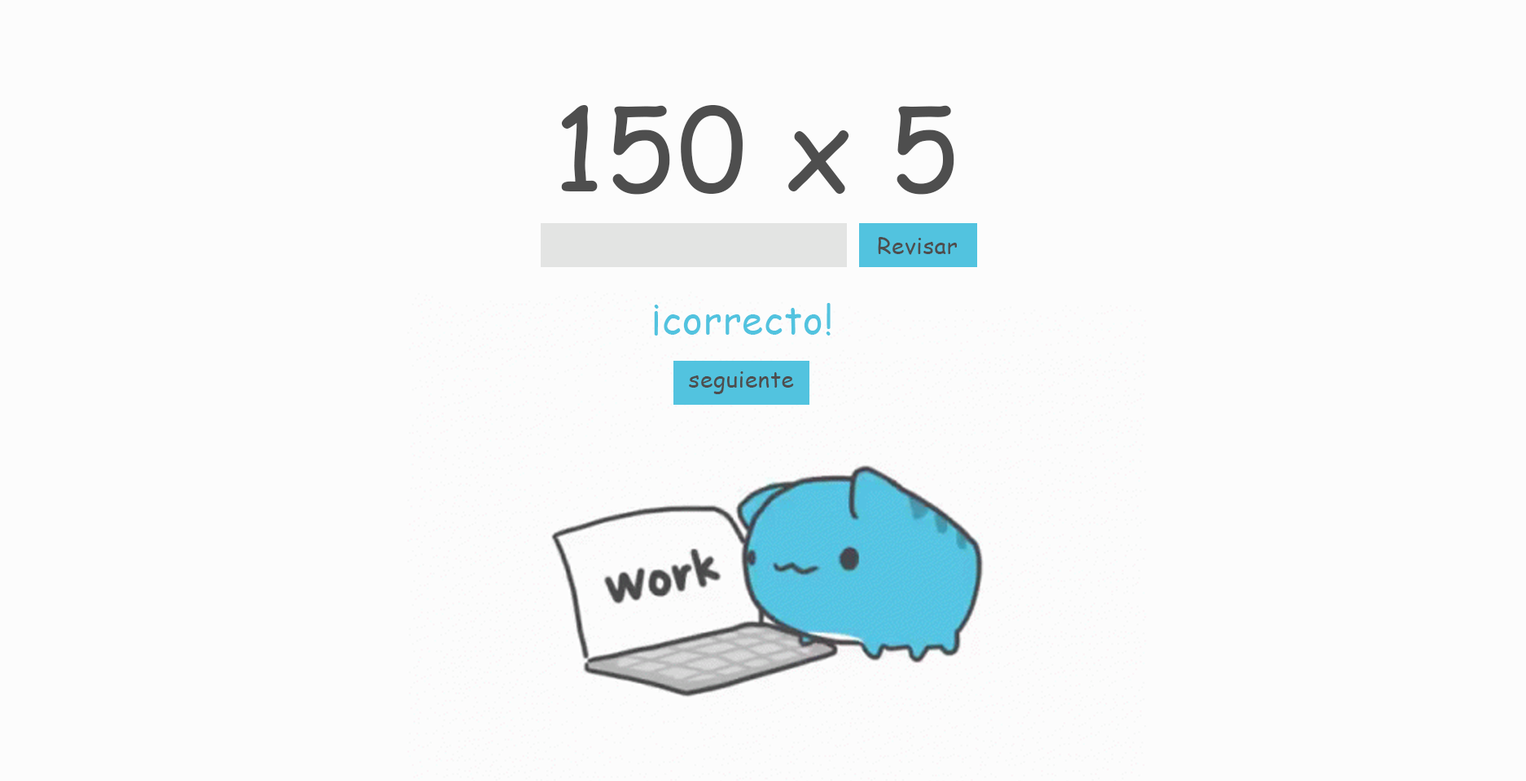
<style>
.page{position:relative;width:1526px;height:781px;background:#fcfcfc}
.page>*{position:absolute;margin:0}
.t1{font:113.2px "ComicSansMS";letter-spacing:0.02em;color:#4e4e4e}
.t2{font:22.8px "ComicSansMS";letter-spacing:0.02em;color:#4e4e4e}
.t3{font:38.3px "ComicSansMS";letter-spacing:0.02em;color:#52c3df}
</style>
<div class="page">
<p class="t1" style="left:561px;top:105px;width:394px;height:90px">150 x 5</p>
<p class="t2" style="left:878px;top:237px;width:79px;height:18px">Revisar</p>
<p class="t3" style="left:654px;top:303px;width:177px;height:33px">¡correcto!</p>
<p class="t2" style="left:689px;top:371px;width:105px;height:23px">seguiente</p>
</div>
